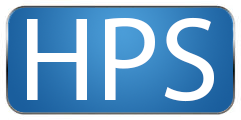
<style>
.page{position:relative;width:241px;height:120px;background:#ffffff}
.page>*{position:absolute;margin:0}
.t1{font:120px "MyriadPro-Regular";color:#ffffff}
</style>
<div class="page">
<p class="t1" style="left:27px;top:17px;width:187px;height:85px">HPS</p>
</div>
